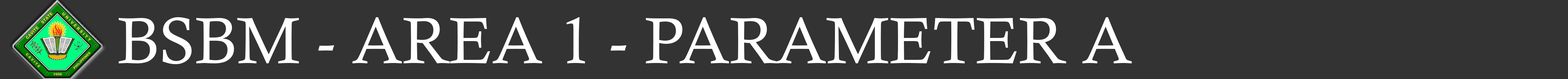
<style>
.page{position:relative;width:1568px;height:79px;background:#333333}
.page>*{position:absolute;margin:0}
.t1{font:65px "CalistoMT";color:#ffffff}
</style>
<div class="page">
<p class="t1" style="left:119px;top:17px;width:1013px;height:47px">BSBM - AREA 1 - PARAMETER A</p>
</div>
